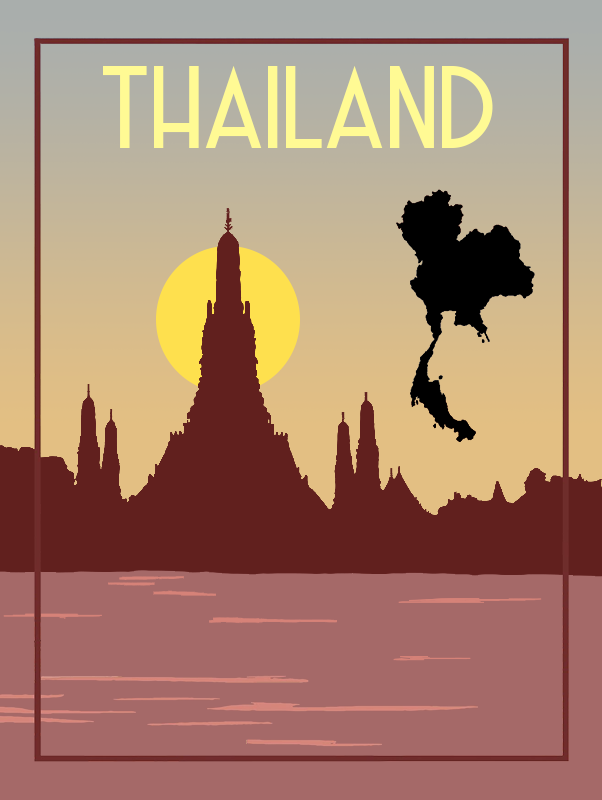
<style>
.page{position:relative;width:602px;height:800px;background:#a56968}
.page>*{position:absolute;margin:0}
.t1{font:117.2px "HaarlemDecoDEMO";color:#fffa94}
</style>
<div class="page">
<p class="t1" style="left:103px;top:66px;width:390px;height:82px">THAILAND</p>
</div>
